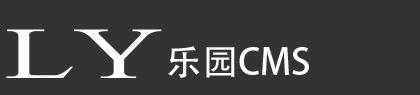
<style>
.page{position:relative;width:420px;height:95px;background:#333333}
.page>*{position:absolute;margin:0}
.t1{font:78.2px "FZBWKSFW--GB1-0";color:#fffefe;scale:1.63 1}
.t2{font:36px "AdobeHeitiStd-Regular";color:#fffefe}
</style>
<div class="page">
<p class="t1" style="left:6px;top:29px;width:156px;height:49px">LY</p>
<p class="t2" style="left:168px;top:46px;width:141px;height:32px">乐园CMS</p>
</div>
